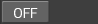
<style>
.page{position:relative;width:98px;height:24px;background:#3e3e3e}
.page>*{position:absolute;margin:0}
.t1{font:14px "Roboto-Regular";letter-spacing:-0.025em;color:#ffffff}
</style>
<div class="page">
<p class="t1" style="left:14px;top:8px;width:24px;height:10px">OFF</p>
</div>
